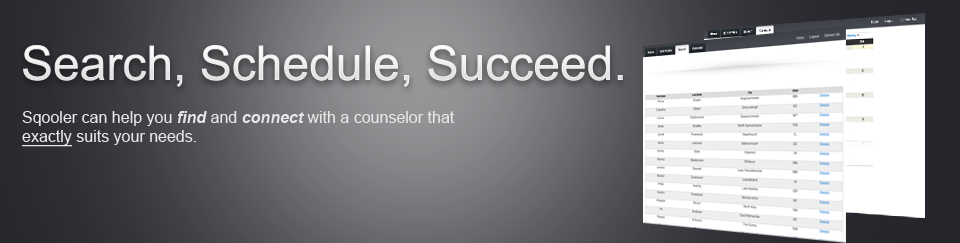
<style>
.page{position:relative;width:960px;height:243px}
.page>*{position:absolute;margin:0}
.t1{font:48px "ArialMT";color:#ffffff}
.t2{font:16px "ArialMT";color:#e7e7e8}
.t3{font:16px "Arial-BoldItalicMT";color:#e7e7e8}
.t4{font:16px "ArialMT";color:#e7e7e8;text-decoration:underline}
</style>
<div class="page">
<p class="t1" style="left:23px;top:45px;width:600px;height:42px">Search, Schedule, Succeed.</p>
<p class="t2" style="left:22px;top:111px;width:433px;height:36px">Sqooler can help you <span class="t3">find</span> and <span class="t3">connect</span> with a counselor that <br><span class="t4">exactly</span> suits your needs.</p>
</div>
